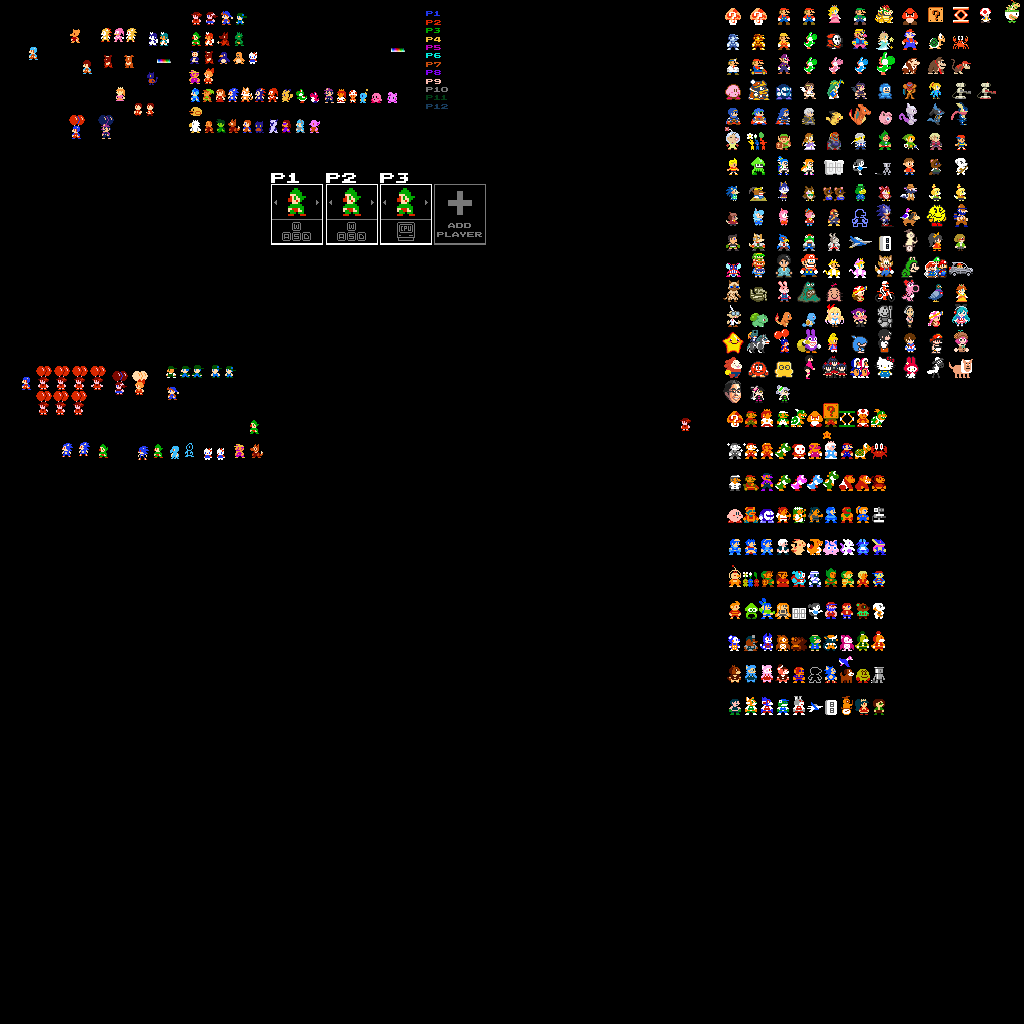
<style>
.page{position:relative;width:1024px;height:1024px;background:#000000}
.page>*{position:absolute;margin:0}
.t1{font:7px "balloon_fight_font";color:#787878;text-transform:uppercase}
.t2{font:7px "balloon_fight_font";color:#2038ec;text-transform:uppercase}
.t3{font:7px "balloon_fight_font";color:#d82800;text-transform:uppercase}
.t4{font:7px "balloon_fight_font";color:#00a800;text-transform:uppercase}
.t5{font:7px "balloon_fight_font";color:#f0bc3c;text-transform:uppercase}
.t6{font:7px "balloon_fight_font";color:#bc00bc;text-transform:uppercase}
.t7{font:7px "balloon_fight_font";color:#00e8d8;text-transform:uppercase}
.t8{font:7px "balloon_fight_font";color:#c84c0c;text-transform:uppercase}
.t9{font:7px "balloon_fight_font";color:#8000f0;text-transform:uppercase}
.t10{font:7px "balloon_fight_font";color:#fcbcb0;text-transform:uppercase}
.t11{font:7px "balloon_fight_font";color:#003c14;text-transform:uppercase}
.t12{font:7px "balloon_fight_font";color:#183c5c;text-transform:uppercase}
.t13{font:14px "balloon_fight_font";color:#ffffff;text-transform:uppercase}
</style>
<div class="page">
<p class="t1" style="left:426px;top:11px;width:22px;height:98px"><span class="t2">P1<br></span><span class="t3">P2<br></span><span class="t4">P3<br></span><span class="t5">P4<br></span><span class="t6">P5<br></span><span class="t7">P6<br></span><span class="t8">P7<br></span><span class="t9">P8<br></span><span class="t10">P9<br></span>P10<br><span class="t11">P11<br></span><span class="t12">P12</span></p>
<p class="t13" style="left:271px;top:173px;width:28px;height:10px">P1</p>
<p class="t13" style="left:326px;top:173px;width:30px;height:10px">P2</p>
<p class="t13" style="left:380px;top:173px;width:28px;height:10px">P3</p>
<p class="t1" style="left:437px;top:223px;width:45px;height:14px;text-align:center">ADD<br>PLAYER</p>
</div>
